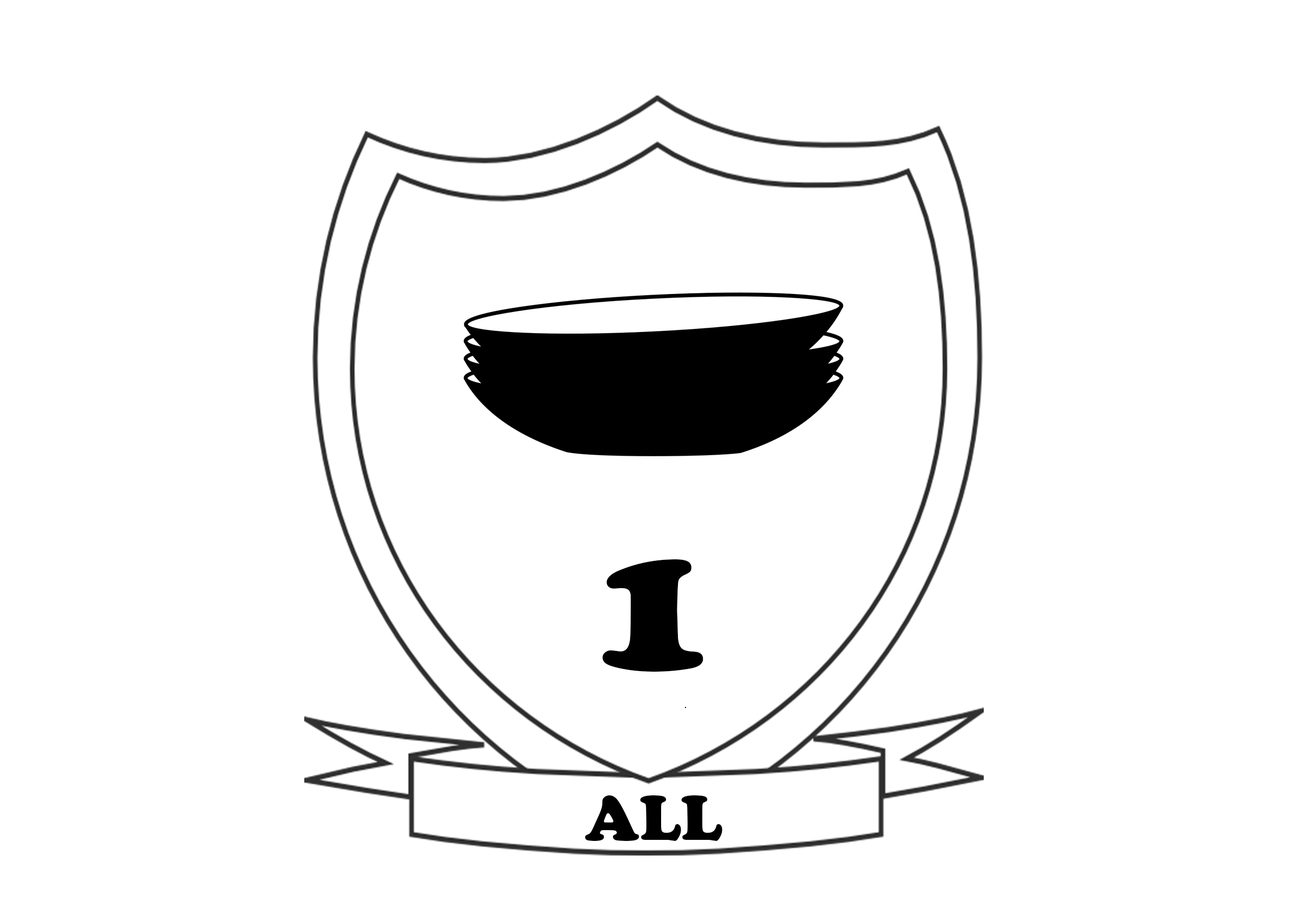
<style>
.page{position:relative;width:1307px;height:912px;background:#ffffff}
.page>*{position:absolute;margin:0}
.t1{font:195.3px "CooperBlack";color:#000000}
.t2{font:65.1px "CooperBlack";color:#000000}
</style>
<div class="page">
<p class="t1" style="left:603px;top:559px;width:101px;height:113px">1</p>
<p class="t2" style="left:585px;top:795px;width:138px;height:46px">ALL</p>
</div>
